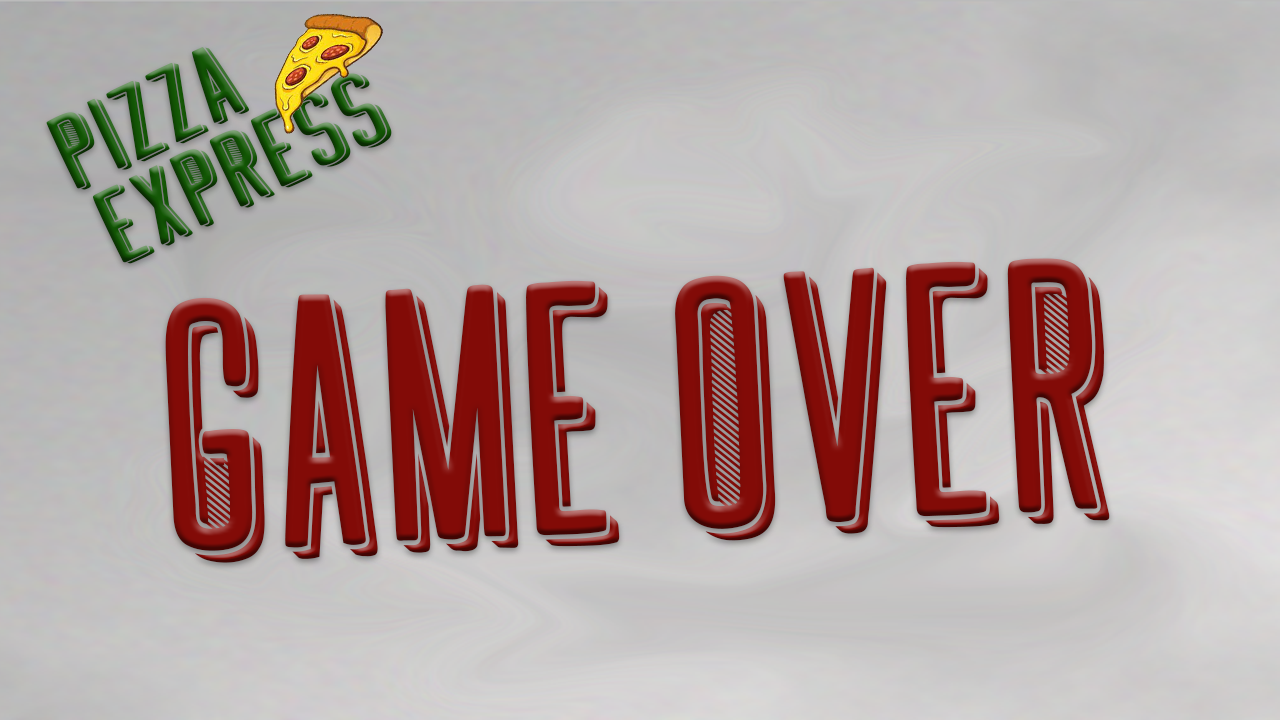
<style>
.page{position:relative;width:1280px;height:720px}
.page>*{position:absolute;margin:0}
.t1{font:117.5px "GREETHINGBLOCKSHADOWLINE";color:#125604;scale:1.06 1}
.t2{font:117.5px "GREETHINGBLOCKSHADOWLINE";scale:1.06 1}
.t3{font:398.6px "GREETHINGBLOCKSHADOWLINE";color:#820b07;scale:0.77 1}
</style>
<div class="page">
<p class="t1" style="left:46px;top:47px;width:203px;height:143px;rotate:-26deg">PIZZA</p>
<p class="t2" style="left:92px;top:73px;width:300px;height:191px;rotate:-26deg">EXPRESS</p>
<p class="t3" style="left:165px;top:258px;width:945px;height:305px;rotate:-3deg">GAME OVER</p>
</div>
